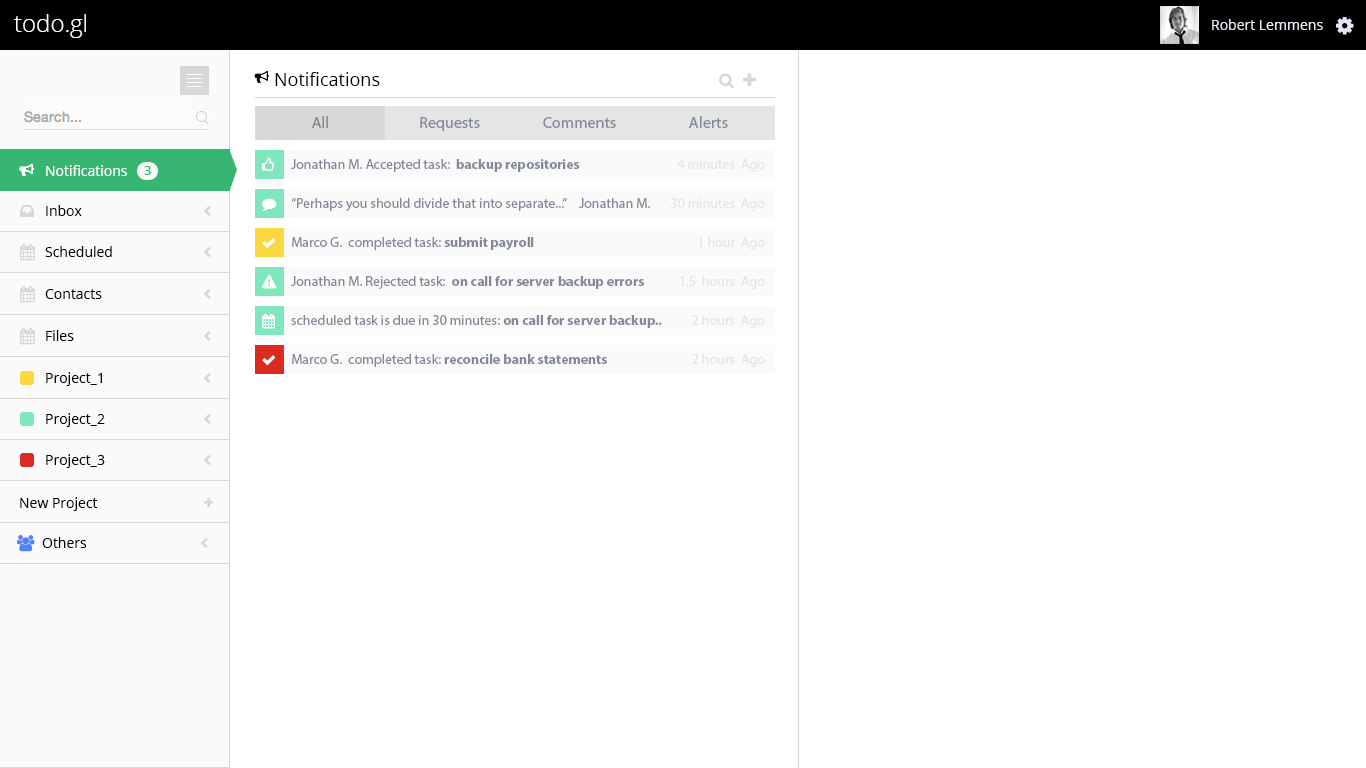
<style>
.page{position:relative;width:1366px;height:768px;background:#ffffff}
.page>*{position:absolute;margin:0}
.t1{font:18px "OpenSans";color:#000000}
.t2{font:16px "MyriadPro-Regular";color:#828999}
.t3{font:14px "MyriadPro-Regular";color:#828999}
.t4{font:14px "MyriadPro-Bold";color:#828999}
.t5{font:14px "MyriadPro-Regular";color:#e5e5e5}
.t6{font:14px "OpenSans";color:#ffffff}
.t7{font:13px "OpenSans-Semibold";color:#37b672}
</style>
<div class="page">
<p class="t1" style="left:275px;top:72px;width:105px;height:14px">Notifications</p>
<p class="t2" style="left:312px;top:116px;width:16px;height:12px">All</p>
<p class="t2" style="left:420px;top:117px;width:60px;height:14px">Requests</p>
<p class="t2" style="left:543px;top:117px;width:73px;height:11px">Comments</p>
<p class="t2" style="left:689px;top:116px;width:39px;height:12px">Alerts</p>
<p class="t3" style="left:291px;top:159px;width:289px;height:13px">Jonathan M. Accepted task:  <span class="t4">backup repositories</span></p>
<p class="t5" style="left:677px;top:159px;width:88px;height:13px">4 minutes  Ago</p>
<p class="t6" style="left:46px;top:165px;width:81px;height:11px">Notifications</p>
<p class="t7" style="left:144px;top:166px;width:7px;height:9px">3</p>
<p class="t3" style="left:291px;top:198px;width:359px;height:13px">“Perhaps you should divide that into separate...” Jonathan M.</p>
<p class="t5" style="left:670px;top:198px;width:95px;height:13px">30 minutes  Ago</p>
<p class="t3" style="left:292px;top:237px;width:242px;height:13px">Marco G.  completed task: <span class="t4">submit payroll</span></p>
<p class="t5" style="left:698px;top:237px;width:67px;height:13px">1 hour  Ago</p>
<p class="t4" style="left:291px;top:276px;width:353px;height:13px"><span class="t3">Jonathan M. Rejected task:  </span>on call for server backup errors</p>
<p class="t5" style="left:680px;top:276px;width:85px;height:13px">1.5  hours  Ago</p>
<p class="t3" style="left:291px;top:315px;width:371px;height:13px">scheduled task is due in 30 minutes: <span class="t4">on call for server backup..</span></p>
<p class="t5" style="left:692px;top:315px;width:73px;height:13px">2 hours  Ago</p>
<p class="t3" style="left:292px;top:354px;width:315px;height:13px">Marco G.  completed task: <span class="t4">reconcile bank statements</span></p>
<p class="t5" style="left:692px;top:354px;width:73px;height:13px">2 hours  Ago</p>
</div>
